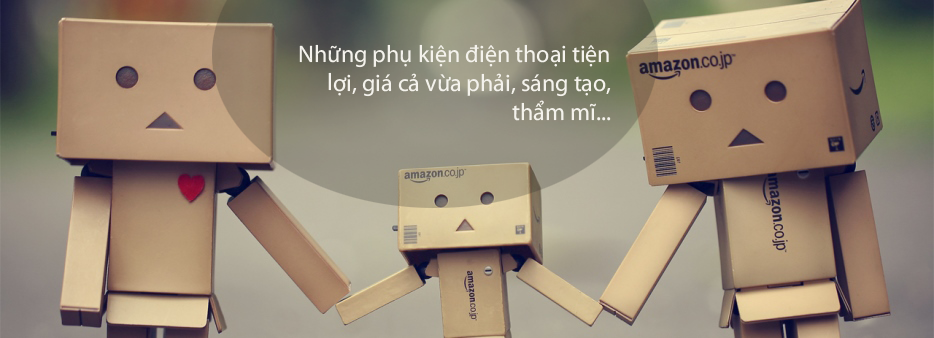
<style>
.page{position:relative;width:934px;height:338px}
.page>*{position:absolute;margin:0}
.t1{font:24px "MyriadPro-Regular";color:#f4f2ec}
</style>
<div class="page">
<p class="t1" style="left:299px;top:44px;width:312px;height:77px;text-align:right">Những phụ kiện điện thoại tiện lợi, giá cả vừa phải, sáng tạo, thẩm mĩ...</p>
</div>
